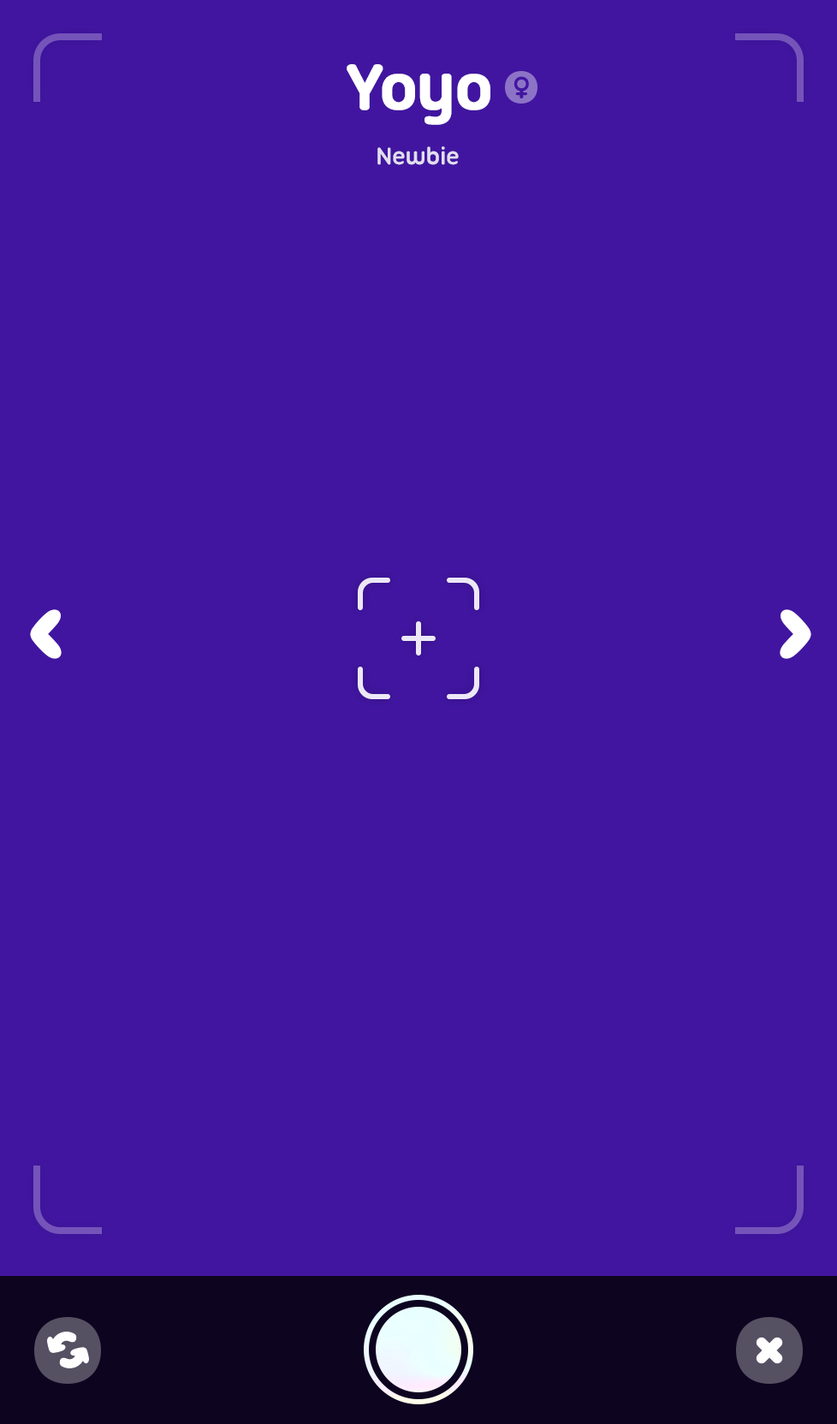
<style>
.page{position:relative;width:837px;height:1424px;background:#4115a0}
.page>*{position:absolute;margin:0}
.t1{font:68.5px "UbuntuTitling-Bold";letter-spacing:-0.025em;color:#ffffff;font-weight:bold}
.t2{font:25.7px "UbuntuTitling-Bold";letter-spacing:-0.025em;color:#e2deee}
</style>
<div class="page">
<p class="t1" style="left:347px;top:64px;width:143px;height:61px">Yoyo</p>
<p class="t2" style="left:377px;top:146px;width:82px;height:19px">Newbie</p>
</div>
